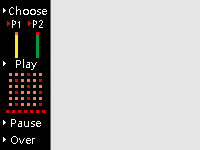
<style>
.page{position:relative;width:200px;height:150px;background:#e6e6e6}
.page>*{position:absolute;margin:0}
.t1{font:10.7px "SimHei";color:#fcfefb}
.t2{font:10.7px "MicrosoftYaHeiUI";color:#fcfefb}
</style>
<div class="page">
<p class="t1" style="left:12px;top:20px;width:8px;height:8px">P1</p>
<p class="t1" style="left:33px;top:20px;width:10px;height:8px">P2</p>
<p class="t2" style="left:16px;top:59px;width:21px;height:11px">Play</p>
<p class="t2" style="left:11px;top:119px;width:30px;height:8px">Pause</p>
<p class="t2" style="left:11px;top:136px;width:24px;height:8px">Over</p>
</div>
